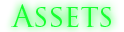
<style>
.page{position:relative;width:124px;height:32px}
.page>*{position:absolute;margin:0}
.t1{font:30px "TrajanPro-Regular";color:#17ff30}
</style>
<div class="page">
<p class="t1" style="left:11px;top:4px;width:100px;height:23px">Assets</p>
</div>
